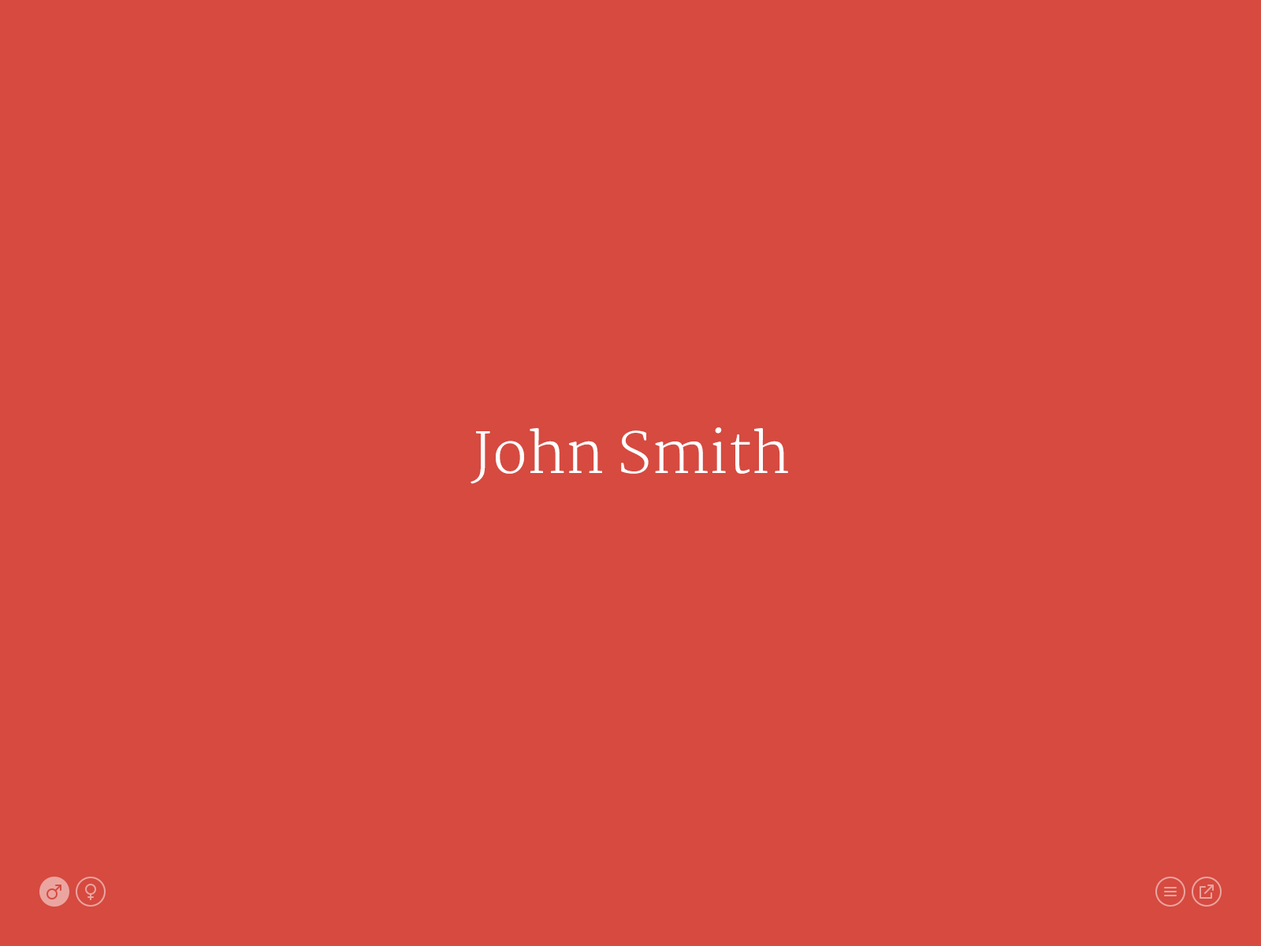
<style>
.page{position:relative;width:1261px;height:946px;background:#d64a40}
.page>*{position:absolute;margin:0}
.t1{font:56.7px "Merriweather-Light";color:#ffffff}
</style>
<div class="page">
<p class="t1" style="left:470px;top:427px;width:318px;height:57px">John Smith</p>
</div>
